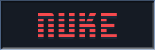
<style>
.page{position:relative;width:155px;height:50px;background:#151b24}
.page>*{position:absolute;margin:0}
.t1{font:36px "Cornerstone"}
</style>
<div class="page">
<p class="t1" style="left:38px;top:13px;width:79px;height:26px">nuke</p>
</div>
